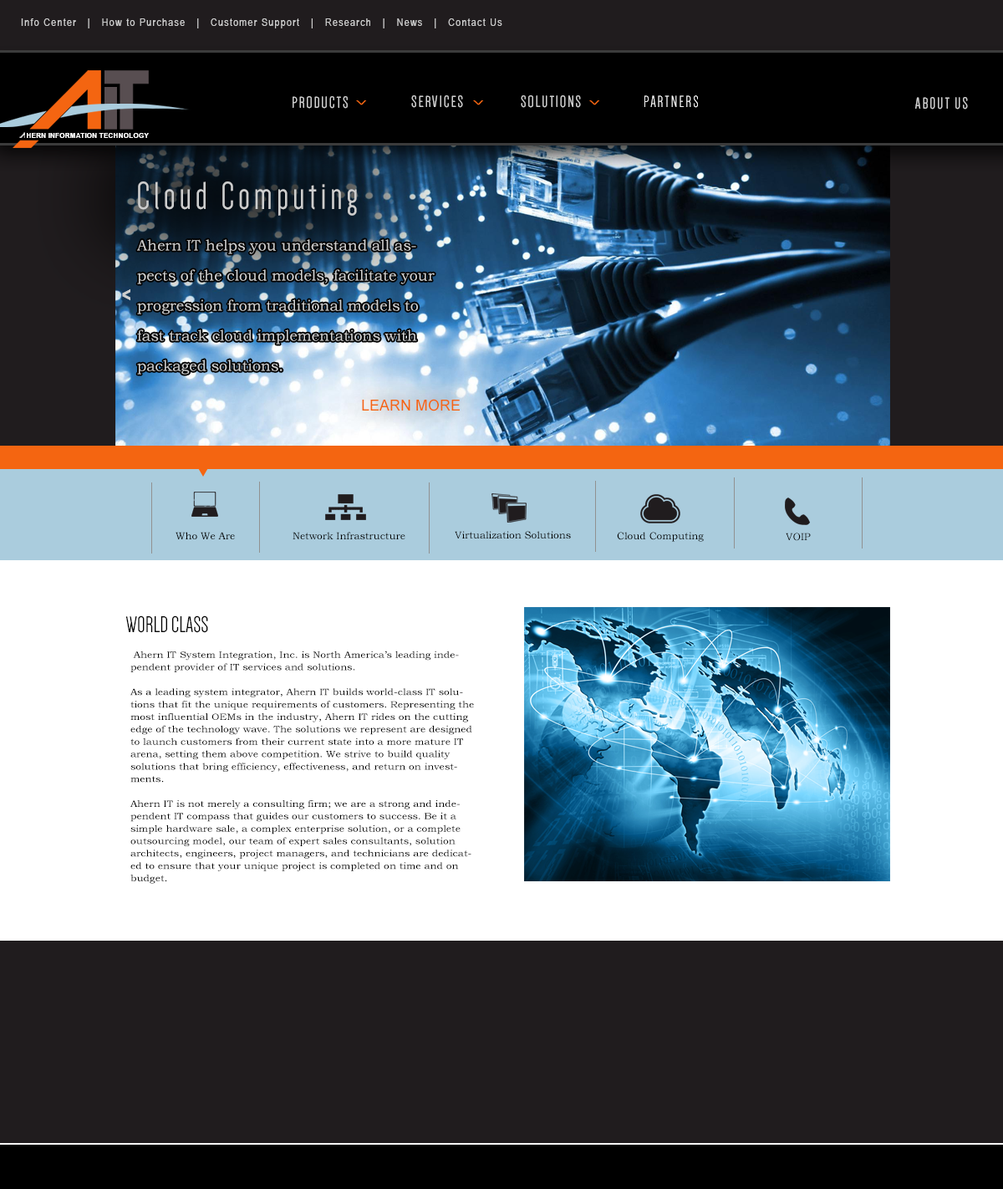
<style>
.page{position:relative;width:1003px;height:1189px;background:#201c1e}
.page>*{position:absolute;margin:0}
.t1{font:10.9px "ArialNarrow";letter-spacing:0.1em;color:#cdcdcd}
.t2{font:16.7px "Dense-Regular";letter-spacing:0.1em;color:#cdcdcd}
.t3{font:16.7px "Dense-Regular";letter-spacing:0.1em;color:#ffffff}
.t4{font:6.9px "Arial-BoldMT";color:#ffffff}
.t5{font:10px "BookmanOldStyle";color:#000000}
.t6{font:23.4px "Dense-Regular";color:#000000}
.t7{font:9.2px/12.4px "BookmanOldStyle";color:#000000;scale:1.1 1}
</style>
<div class="page">
<p class="t1" style="left:21px;top:18px;width:481px;height:10px">Info Center   |   How to Purchase   |   Customer Support   |   Research   |   News   |   Contact Us</p>
<p class="t2" style="left:293px;top:96px;width:55px;height:13px">PRODUCTS</p>
<p class="t2" style="left:411px;top:95px;width:52px;height:13px">SERVICES</p>
<p class="t2" style="left:521px;top:95px;width:60px;height:13px">SOLUTIONS</p>
<p class="t3" style="left:645px;top:95px;width:53px;height:13px">PARTNERS</p>
<p class="t2" style="left:915px;top:97px;width:53px;height:13px">ABOUT US</p>
<p class="t4" style="left:27px;top:133px;width:122px;height:5px">HERN INFORMATION TECHNOLOGY</p>
<p class="t5" style="left:176px;top:532px;width:59px;height:7px">Who We Are</p>
<p class="t5" style="left:293px;top:532px;width:112px;height:7px">Network Infrastructure</p>
<p class="t5" style="left:455px;top:531px;width:116px;height:8px">Virtualization Solutions</p>
<p class="t5" style="left:617px;top:532px;width:87px;height:10px">Cloud Computing</p>
<p class="t5" style="left:786px;top:532px;width:25px;height:9px">VOIP</p>
<p class="t6" style="left:125px;top:615px;width:83px;height:18px">WORLD CLASS</p>
<p class="t7" style="left:130px;top:650px;width:344px;height:234px">Ahern IT System Integration, Inc. is North America’s leading independent provider of IT services and solutions.<br><br>As a leading system integrator, Ahern IT builds world-class IT solutions that fit the unique requirements of customers. Representing the most influential OEMs in the industry, Ahern IT rides on the cutting edge of the technology wave. The solutions we represent are designed to launch customers from their current state into a more mature IT arena, setting them above competition. We strive to build quality solutions that bring efficiency, effectiveness, and return on investments.<br><br>Ahern IT is not merely a consulting firm; we are a strong and independent IT compass that guides our customers to success. Be it a simple hardware sale, a complex enterprise solution, or a complete outsourcing model, our team of expert sales consultants, solution architects, engineers, project managers, and technicians are dedicated to ensure that your unique project is completed on time and on budget.</p>
</div>
